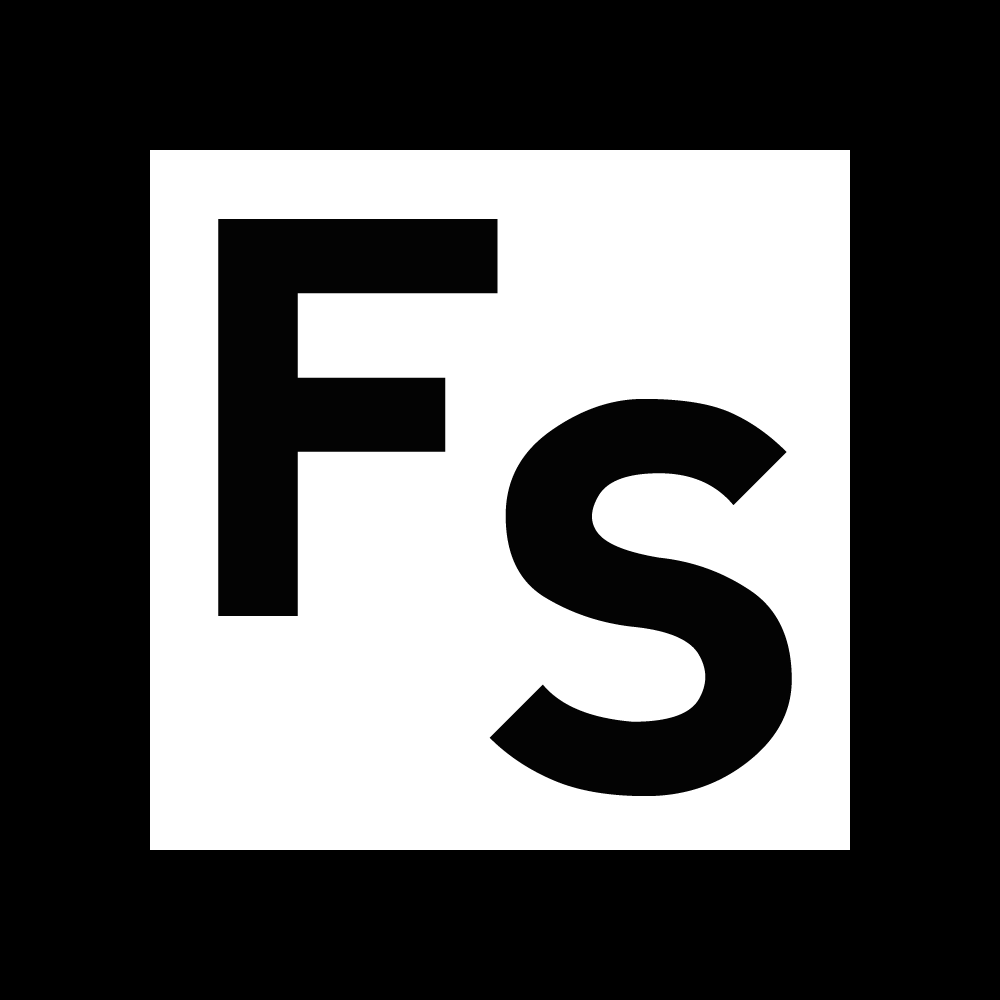
<style>
.page{position:relative;width:1000px;height:1000px;background:#000000}
.page>*{position:absolute;margin:0}
.t1{font:541.7px "nevis-Bold";color:#030303}
</style>
<div class="page">
<p class="t1" style="left:218px;top:219px;width:280px;height:397px">F</p>
<p class="t1" style="left:489px;top:399px;width:303px;height:397px">S</p>
</div>
